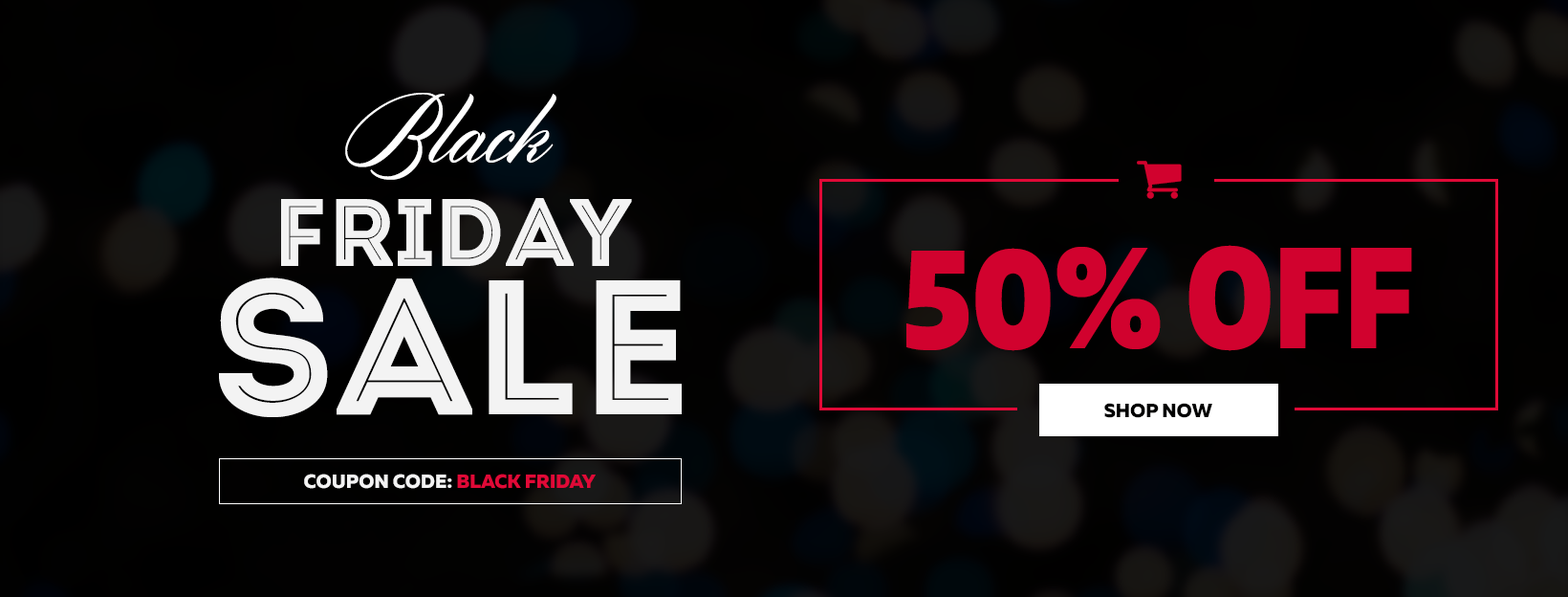
<style>
.page{position:relative;width:1568px;height:597px}
.page>*{position:absolute;margin:0}
.t1{font:114.7px "Cylburn-Regular";color:#ffffff}
.t2{font:95.6px/148.2px "Intro-Inline";color:#f3f3f3}
.t3{font:191.2px/148.2px "Intro-Inline";color:#f3f3f3}
.t4{font:143.4px "MullerNarrow-ExtraBold";color:#d1022e}
.t5{font:19.1px "MullerExtraBoldDEMO";color:#010100}
.t6{font:19.1px "MullerExtraBoldDEMO";color:#e10937}
.t7{font:19.1px "MullerExtraBoldDEMO";color:#f3f3f3}
.t8{font:19.1px "Intro";color:#f3f3f3}
</style>
<div class="page">
<p class="t1" style="left:345px;top:93px;width:211px;height:87px">Black</p>
<p class="t2" style="left:219px;top:198px;width:463px;height:219px;text-align:center">FRIDAY<br><span class="t3">SALE</span></p>
<p class="t4" style="left:906px;top:245px;width:506px;height:106px">50% OFF</p>
<p class="t5" style="left:1104px;top:403px;width:108px;height:15px">SHOP NOW</p>
<p class="t6" style="left:304px;top:473px;width:292px;height:16px"><span class="t7">COUPON CODE</span><span class="t8">: </span>BLACK FRIDAY</p>
</div>
